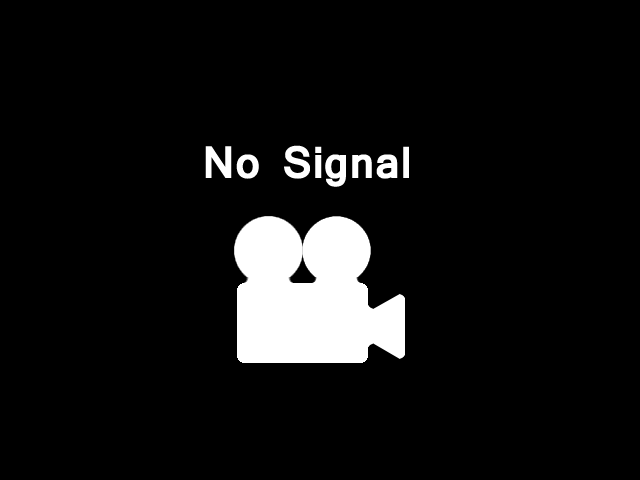
<style>
.page{position:relative;width:640px;height:480px;background:#000000}
.page>*{position:absolute;margin:0}
.t1{font:42.8px "Mangal-Bold";color:#ffffff}
</style>
<div class="page">
<p class="t1" style="left:205px;top:145px;width:204px;height:42px">No Signal</p>
</div>
